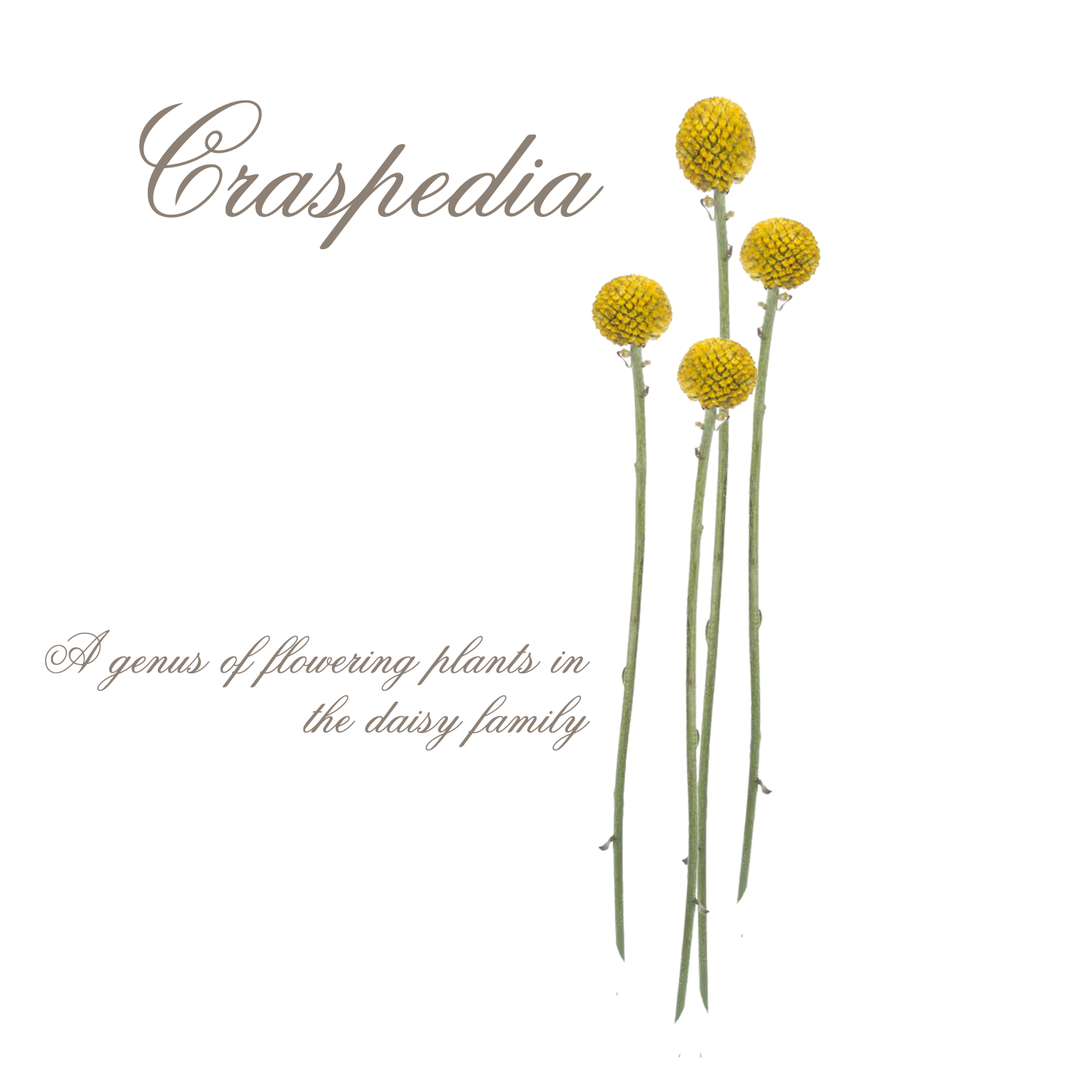
<style>
.page{position:relative;width:1092px;height:1092px;background:#ffffff}
.page>*{position:absolute;margin:0}
.t1{font:158.9px "Old-Scrip";color:#8d8074}
.t2{font:59.6px/59.6px "Old-Scrip";color:#8d8074}
</style>
<div class="page">
<p class="t1" style="left:139px;top:100px;width:465px;height:150px">Craspedia</p>
<p class="t2" style="left:45px;top:630px;width:545px;height:121px;text-align:right">A genus of flowering plants in<br>the daisy family</p>
</div>
